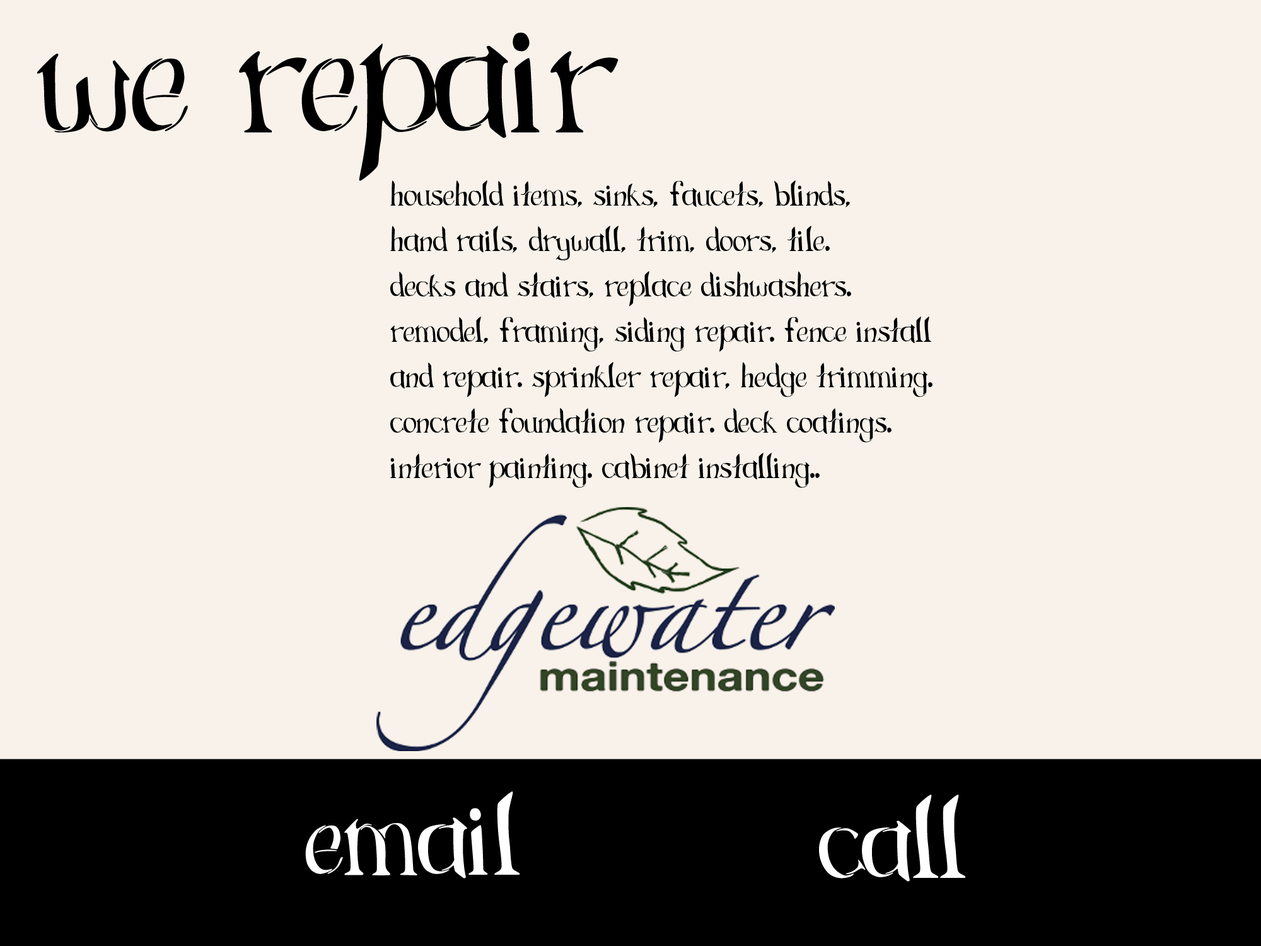
<style>
.page{position:relative;width:1261px;height:946px;background:#f8f2ea}
.page>*{position:absolute;margin:0}
.t1{font:189.1px "GreenGrass-Regular";color:#000000}
.t2{font:37.8px "GreenGrass-Regular";color:#000000}
.t3{font:126.1px "GreenGrass-Regular";color:#ffffff}
</style>
<div class="page">
<p class="t1" style="left:37px;top:32px;width:581px;height:149px">We Repair</p>
<p class="t2" style="left:390px;top:180px;width:542px;height:308px">household items, sinks, faucets, blinds, <br>hand rails, drywall, trim, doors, tile. <br>Decks and stairs, Replace dishwashers.<br>Remodel, framing, siding repair. Fence install <br>and repair. Sprinkler repair, hedge trimming. <br>Concrete foundation repair. Deck coatings. <br>Interior painting. Cabinet installing..</p>
<p class="t3" style="left:305px;top:791px;width:214px;height:87px">Email</p>
<p class="t3" style="left:819px;top:794px;width:146px;height:87px">call</p>
</div>
